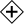
<style>
.page{position:relative;width:24px;height:24px;background:#ffffff}
.page>*{position:absolute;margin:0}
.t1{font:24px "ArialMT";color:#000000}
</style>
<div class="page">
<p class="t1" style="left:6px;top:6px;width:12px;height:12px">+</p>
</div>
